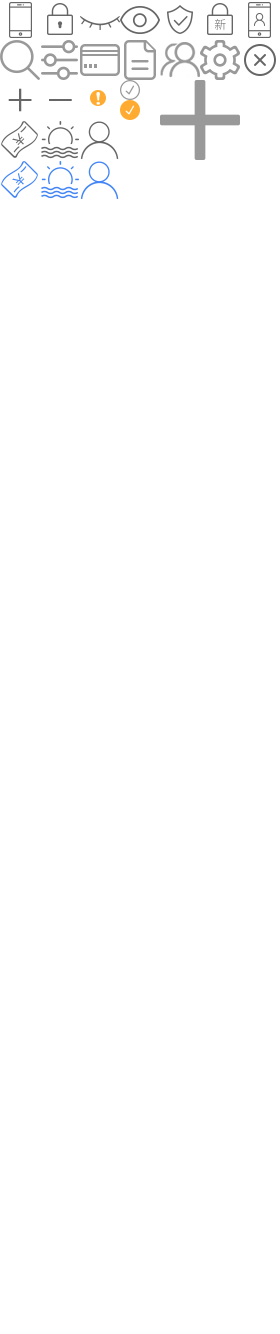
<style>
.page{position:relative;width:280px;height:1334px;background:#ffffff}
.page>*{position:absolute;margin:0}
.t1{font:31.4px "SourceHanSansCN-Regular";color:#666666}
</style>
<div class="page">
<p class="t1" style="left:8px;top:88px;width:24px;height:24px">＋</p>
<p class="t1" style="left:49px;top:99px;width:23px;height:2px">－</p>
</div>
